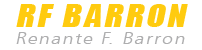
<style>
.page{position:relative;width:202px;height:50px;background:#ffffff}
.page>*{position:absolute;margin:0}
.t1{font:29.2px "Impact";letter-spacing:0.08em;color:#ffde00;font-style:italic;scale:1.17 1}
.t2{font:16.7px "Humanist777BT-LightB";letter-spacing:0.08em;color:#aeaeaf;font-style:italic;scale:1.17 1}
</style>
<div class="page">
<p class="t1" style="left:16px;top:4px;width:172px;height:23px">RF BARRON</p>
<p class="t2" style="left:16px;top:32px;width:169px;height:12px">Renante F. Barron</p>
</div>
